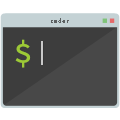
<style>
.page{position:relative;width:120px;height:120px;background:#484848}
.page>*{position:absolute;margin:0}
.t1{font:6.5px "SourceCodePro-Light";color:#5c6061}
.t2{font:32.5px "SourceCodePro-Medium";color:#9dc936}
</style>
<div class="page">
<p class="t1" style="left:51px;top:18px;width:18px;height:5px">cmder</p>
<p class="t2" style="left:15px;top:39px;width:16px;height:29px">$</p>
</div>
